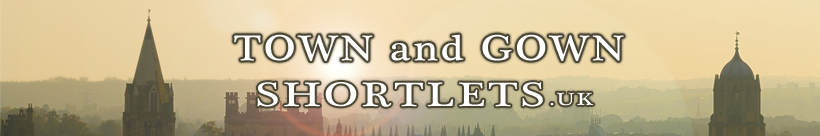
<style>
.page{position:relative;width:820px;height:136px}
.page>*{position:absolute;margin:0}
.t1{font:36.8px "PlantagenetCherokee";letter-spacing:0.07em;color:#ffffff;scale:1.14 1}
.t2{font:34.7px "PlantagenetCherokee";letter-spacing:0.07em;color:#ffffff;scale:1.31 1}
.t3{font:18px "PlantagenetCherokee";letter-spacing:0.07em;color:#ffffff;scale:1.31 1}
</style>
<div class="page">
<p class="t1" style="left:234px;top:34px;width:390px;height:27px">TOWN and GOWN</p>
<p class="t2" style="left:257px;top:82px;width:286px;height:25px">SHORTLETS</p>
<p class="t3" style="left:550px;top:92px;width:44px;height:14px">.UK</p>
</div>
